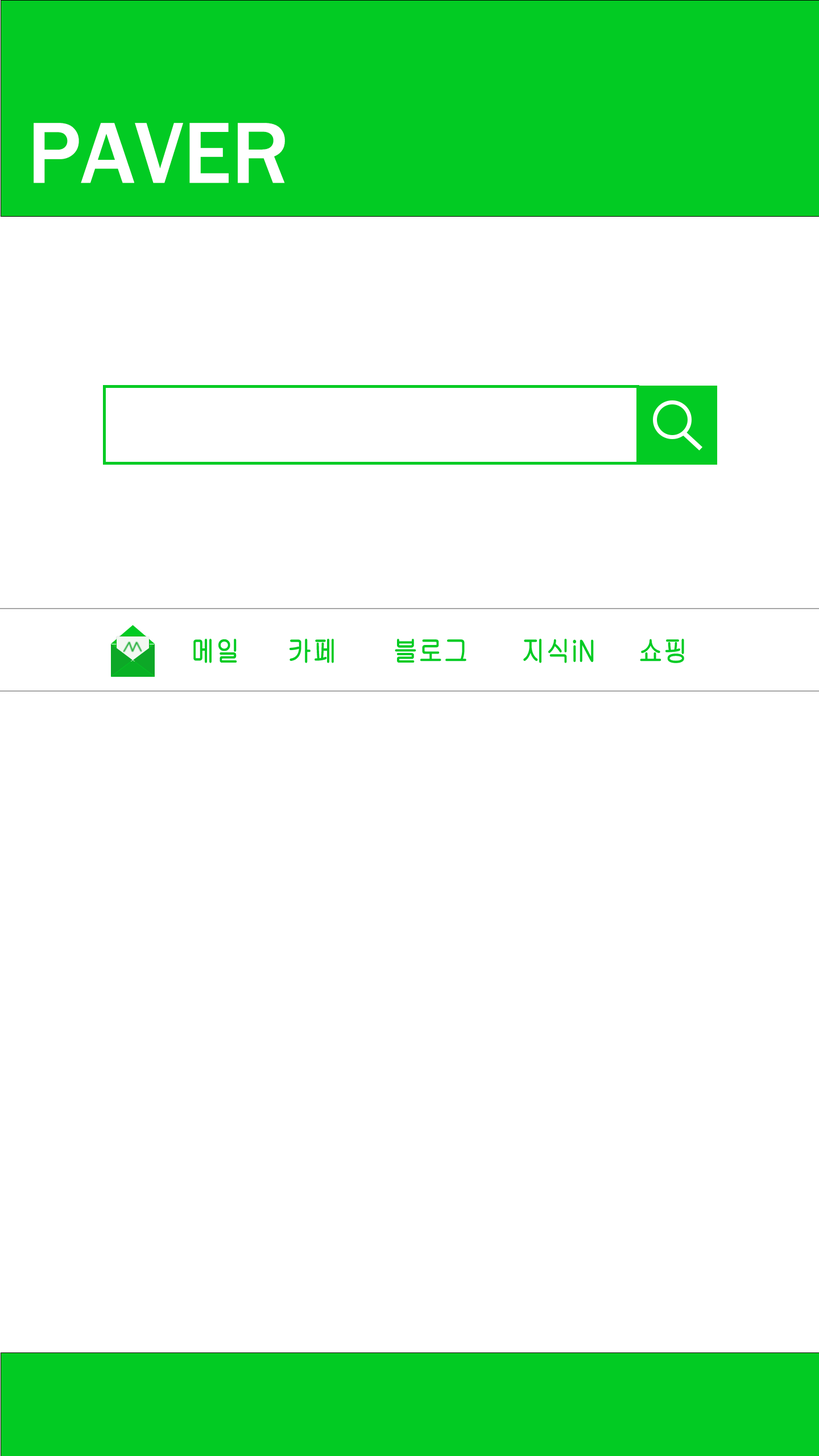
<style>
.page{position:relative;width:819px;height:1456px;background:#ffffff}
.page>*{position:absolute;margin:0}
.t1{font:89.6px "FranklinGothic-Medium";color:#ffffff}
.t2{font:28.5px "Gulim";color:#02cb23;font-weight:bold;scale:0.86 1}
</style>
<div class="page">
<p class="t1" style="left:34px;top:123px;width:251px;height:60px">PAVER</p>
<p class="t2" style="left:193px;top:639px;width:44px;height:24px">메일</p>
<p class="t2" style="left:289px;top:639px;width:45px;height:24px">카페</p>
<p class="t2" style="left:395px;top:639px;width:71px;height:24px">블로그</p>
<p class="t2" style="left:523px;top:639px;width:71px;height:24px">지식iN</p>
<p class="t2" style="left:640px;top:639px;width:44px;height:24px">쇼핑</p>
</div>
